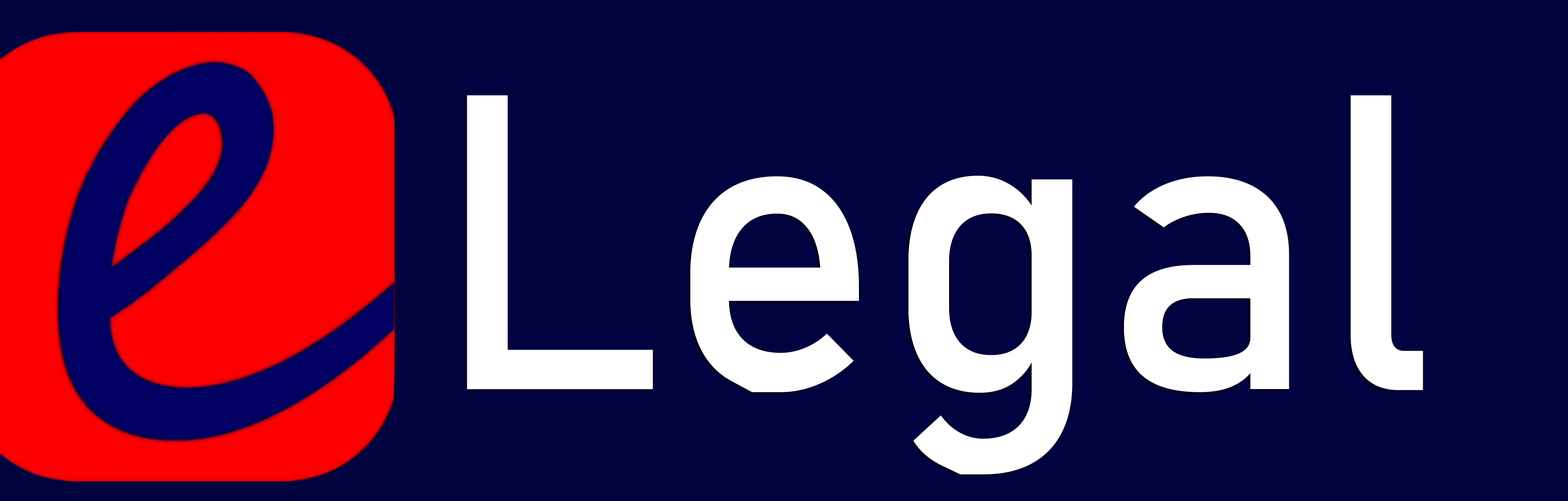
<style>
.page{position:relative;width:1568px;height:501px;background:#010240}
.page>*{position:absolute;margin:0}
.t1{font:413.8px "Bahnschrift";color:#ffffff}
</style>
<div class="page">
<p class="t1" style="left:467px;top:95px;width:956px;height:380px">Legal</p>
</div>
